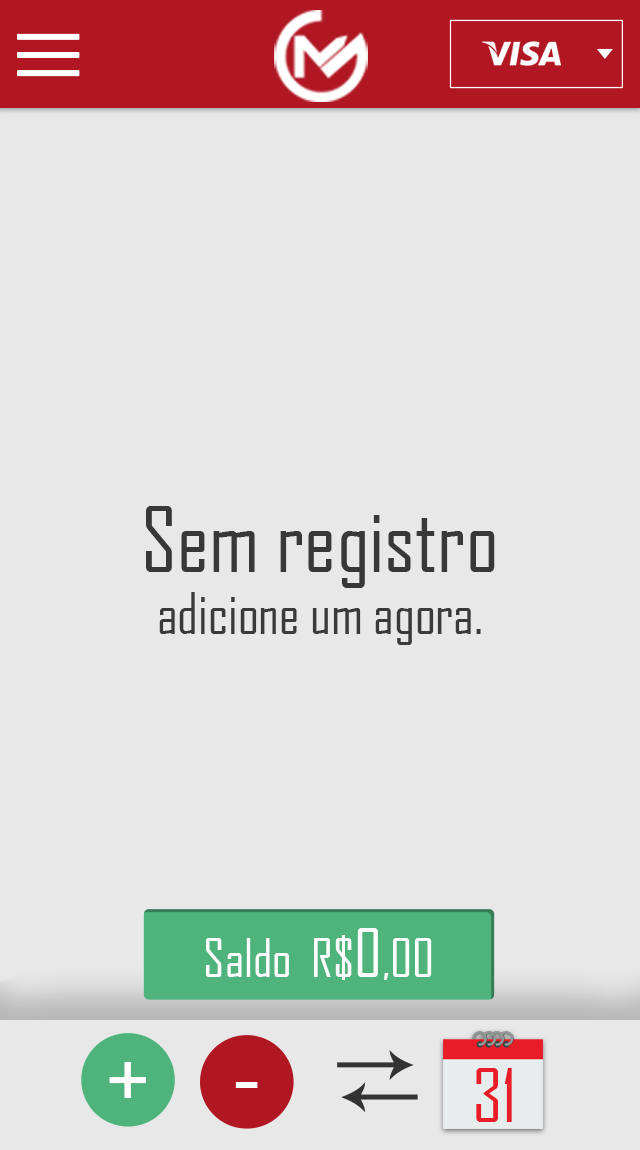
<style>
.page{position:relative;width:640px;height:1150px;background:#e8e8e8}
.page>*{position:absolute;margin:0}
.t1{font:86.1px "AgencyFB-Reg";color:#383838}
.t2{font:54.7px "AgencyFB-Reg";color:#3a3a3a}
.t3{font:51px "AgencyFB-Reg";color:#ffffff}
.t4{font:63.7px "AgencyFB-Reg";color:#ffffff}
.t5{font:105.8px "AgencyFB-Reg";color:#ffffff}
.t6{font:70.7px "AgencyFB-Reg";color:#e81d27}
</style>
<div class="page">
<p class="t1" style="left:146px;top:506px;width:349px;height:82px">Sem registro</p>
<p class="t2" style="left:159px;top:592px;width:322px;height:53px">adicione um agora.</p>
<p class="t3" style="left:314px;top:928px;width:118px;height:52px">R$<span class="t4">0</span>,00</p>
<p class="t3" style="left:206px;top:938px;width:83px;height:39px">Saldo</p>
<p class="t5" style="left:109px;top:1062px;width:37px;height:36px">+</p>
<p class="t6" style="left:476px;top:1068px;width:36px;height:54px">31</p>
<p class="t5" style="left:235px;top:1082px;width:23px;height:6px">-</p>
</div>
